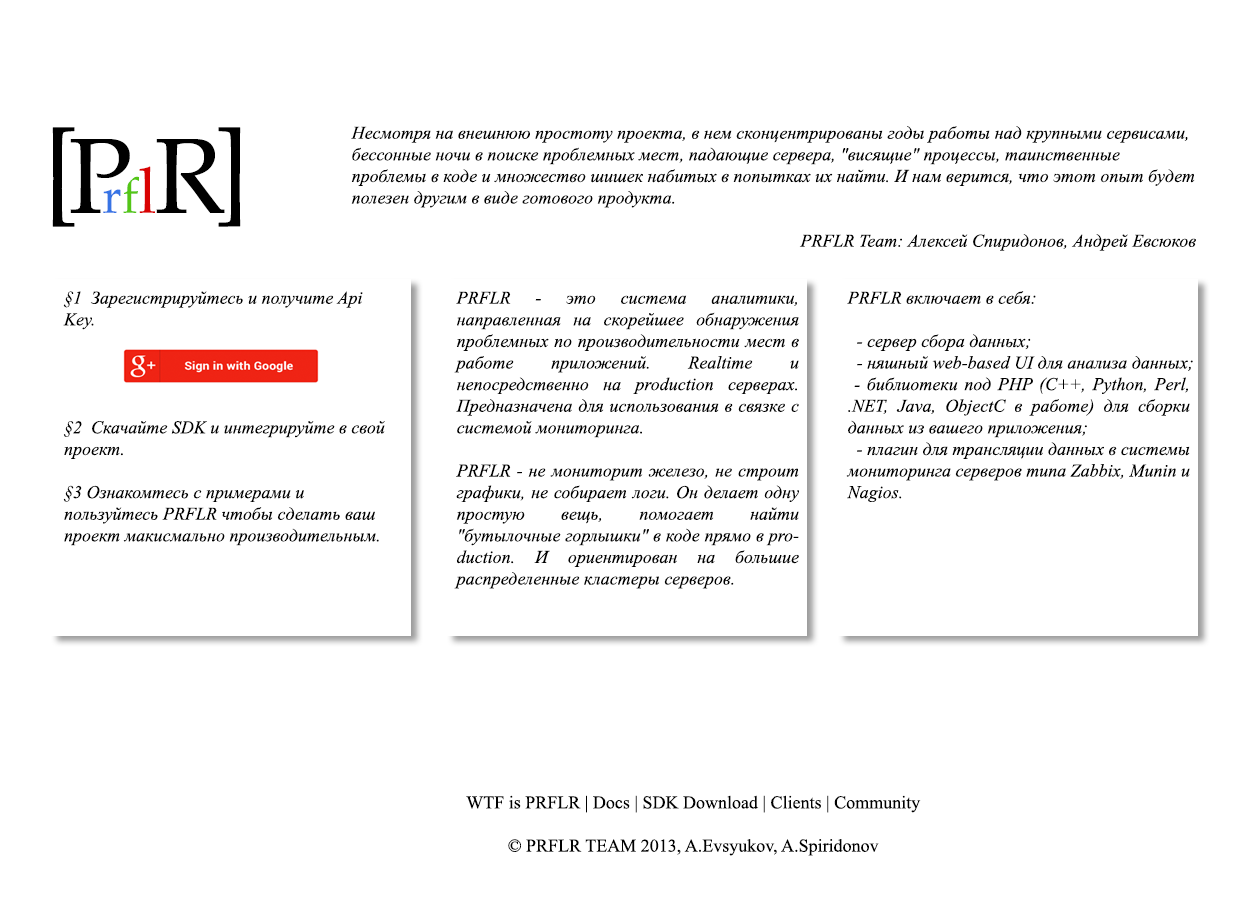
<style>
.page{position:relative;width:1257px;height:900px;background:#ffffff}
.page>*{position:absolute;margin:0}
.t1{font:18px "TimesNewRomanPS-ItalicMT";color:#000000}
.t2{font:18px "TimesNewRomanPSMT";color:#000000}
</style>
<div class="page">
<p class="t1" style="left:351px;top:126px;width:845px;height:125px">Несмотря на внешнюю простоту проекта, в нем сконцентрированы годы работы над крупными сервисами, бессонные ночи в поиске проблемных мест, падающие сервера, "висящие" процессы, таинственные проблемы в коде и множество шишек набитых в попытках их найти. И нам верится, что этот опыт будет полезен другим в виде готового продукта.<br><br>PRFLR Team: Алексей Спиридонов, Андрей Евсюков</p>
<p class="t1" style="left:63px;top:291px;width:322px;height:255px">§1  Зарегистрируйтесь и получите Api Key.<br><br><br><br><br>§2  Скачайте SDK и интегрируйте в свой проект.<br><br>§3 Ознакомтесь с примерами и пользуйтесь PRFLR чтобы сделать ваш проект макисмально производительным.</p>
<p class="t1" style="left:454px;top:291px;width:345px;height:298px;text-align:justify">PRFLR - это система аналитики, направленная на скорейшее обнаружения проблемных по производительности мест в работе приложений. Realtime и непосредственно на production серверах. Предназначена для использования в связке с системой мониторинга.<br><br>PRFLR - не мониторит железо, не строит графики, не собирает логи. Он делает одну простую вещь, помогает найти "бутылочные горлышки" в коде прямо в production. И ориентирован на большие распределенные кластеры серверов.</p>
<p class="t1" style="left:846px;top:291px;width:347px;height:211px;text-align:justify">PRFLR включает в себя:<br><br>  - сервер сбора данных;<br>  - няшный web-based UI для анализа данных;<br> - библиотеки под PHP (C++, Python, Perl, .NET, Java, ObjectC в работе) для сборки данных из вашего приложения;<br>  - плагин для трансляции данных в системы мониторинга серверов типа Zabbix, Munin и Nagios.</p>
<p class="t2" style="left:466px;top:795px;width:455px;height:61px;text-align:center">WTF is PRFLR | Docs | SDK Download | Clients | Community <br><br>© PRFLR TEAM 2013, A.Evsyukov, A.Spiridonov</p>
</div>
